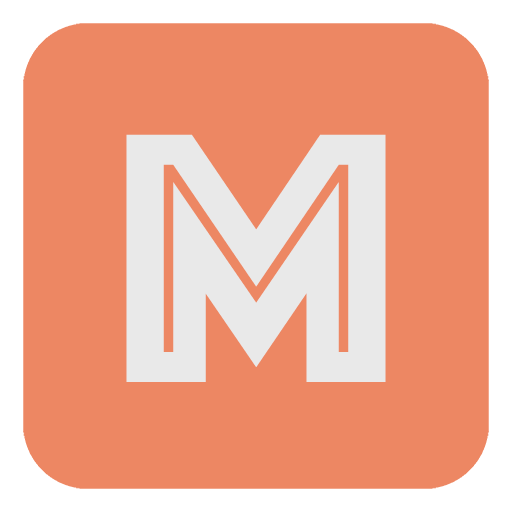
<style>
.page{position:relative;width:512px;height:512px;background:#ed8763}
.page>*{position:absolute;margin:0}
.t1{font:370px "Phosphate-Inline";color:#e9e9e9}
</style>
<div class="page">
<p class="t1" style="left:126px;top:134px;width:260px;height:248px">M</p>
</div>
